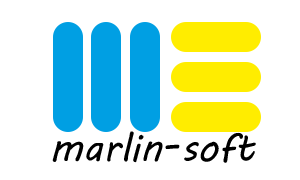
<style>
.page{position:relative;width:300px;height:180px;background:#ffffff}
.page>*{position:absolute;margin:0}
.t1{font:39.8px "MVBoli";color:#000000}
</style>
<div class="page">
<p class="t1" style="left:52px;top:131px;width:204px;height:32px">marlin-soft</p>
</div>
